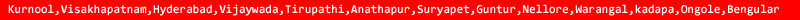
<style>
.page{position:relative;width:800px;height:20px;background:#ff0000}
.page>*{position:absolute;margin:0}
.t1{font:12px "Consolas-Bold";color:#ffffff}
</style>
<div class="page">
<p class="t1" style="left:8px;top:4px;width:771px;height:12px">Kurnool,Visakhapatnam,Hyderabad,Vijaywada,Tirupathi,Anathapur,Suryapet,Guntur,Nellore,Warangal,kadapa,Ongole,Bengular</p>
</div>
